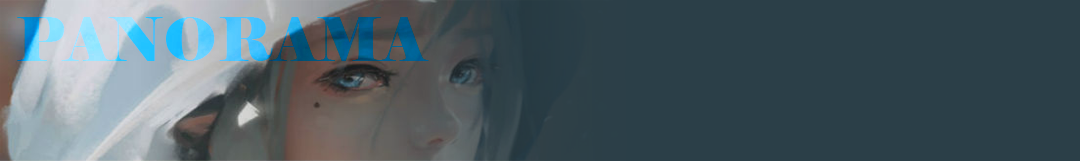
<style>
.page{position:relative;width:1080px;height:161px;background:#2b3f48}
.page>*{position:absolute;margin:0}
.t1{font:60px "Elephant-Regular"}
</style>
<div class="page">
<p class="t1" style="left:17px;top:17px;width:412px;height:44px">PANORAMA</p>
<p class="t1" style="left:17px;top:17px;width:412px;height:44px">PANORAMA</p>
<p class="t1" style="left:17px;top:17px;width:412px;height:44px">PANORAMA</p>
<p class="t1" style="left:17px;top:17px;width:412px;height:44px">PANORAMA</p>
</div>
